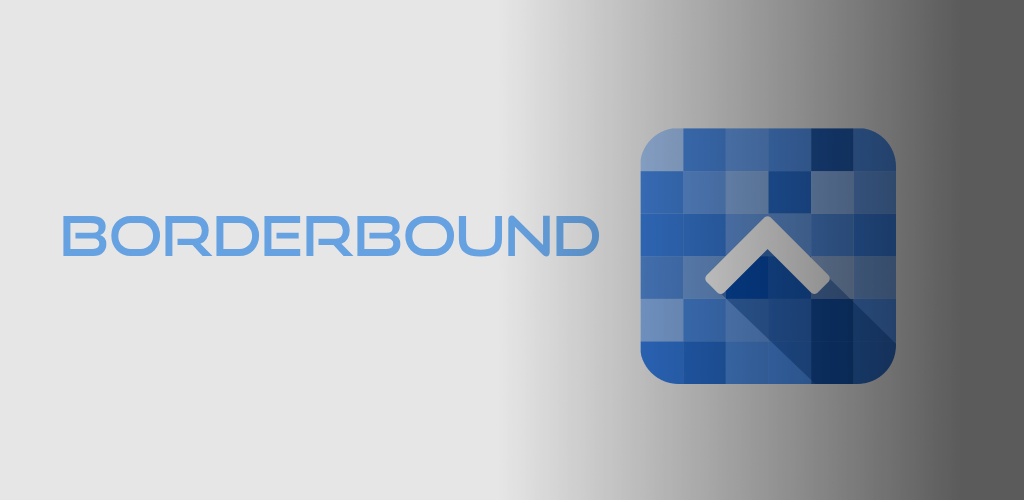
<style>
.page{position:relative;width:1024px;height:500px;background:#e6e6e6}
.page>*{position:absolute;margin:0}
.t1{font:55px "GoodTimesRg-Regular";color:#66a2e1}
</style>
<div class="page">
<p class="t1" style="left:63px;top:215px;width:537px;height:42px">BorderBound</p>
</div>
